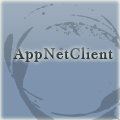
<style>
.page{position:relative;width:120px;height:120px;background:#7e94ae}
.page>*{position:absolute;margin:0}
.t1{font:16.5px "BaskOldFace";letter-spacing:0.09em;color:#384047;scale:0.91 1}
</style>
<div class="page">
<p class="t1" style="left:13px;top:47px;width:100px;height:15px">AppNetClient</p>
</div>
